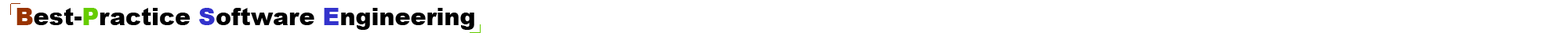
<style>
.page{position:relative;width:1568px;height:33px;background:#ffffff}
.page>*{position:absolute;margin:0}
.t1{font:23.5px "Arial-Black";color:#000000}
.t2{font:23.5px "Arial-Black";color:#993300}
.t3{font:23.5px "Arial-Black";color:#66cc00}
.t4{font:23.5px "Arial-Black";color:#3333cc}
</style>
<div class="page">
<p class="t1" style="left:16px;top:8px;width:458px;height:22px"><span class="t2">B</span>est-<span class="t3">P</span>ractice <span class="t4">S</span>oftware <span class="t4">E</span>ngineering</p>
</div>
